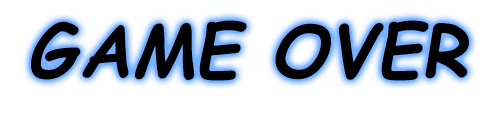
<style>
.page{position:relative;width:494px;height:114px;background:#ffffff}
.page>*{position:absolute;margin:0}
.t1{font:72px "ComicSansMS-BoldItalic";color:#000000}
</style>
<div class="page">
<p class="t1" style="left:31px;top:20px;width:438px;height:61px">GAME OVER</p>
</div>
